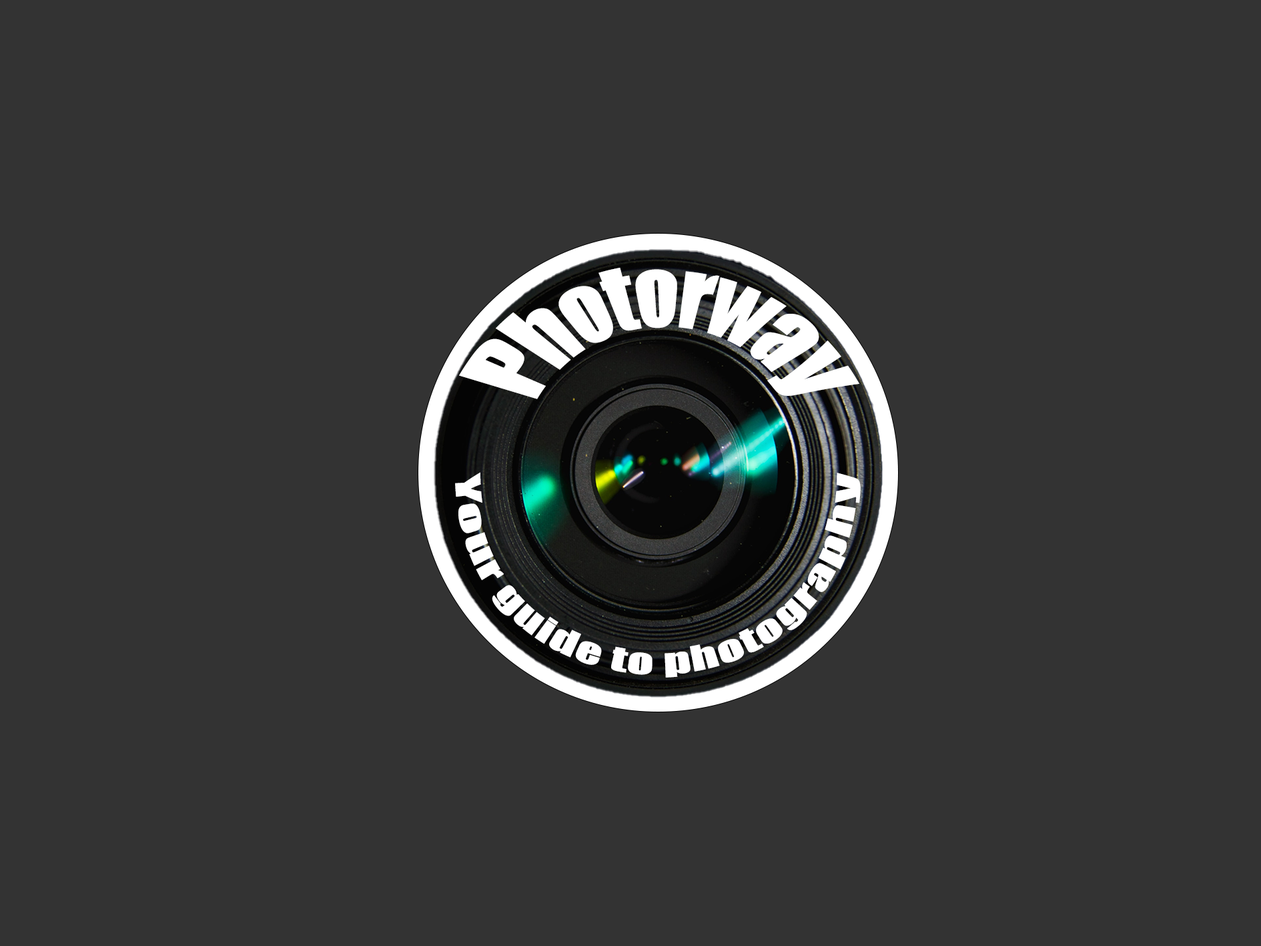
<style>
.page{position:relative;width:1261px;height:946px;background:#333333}
.page>*{position:absolute;margin:0}
.t1{font:55.8px "Impact";color:#ffffff}
.t2{font:32.1px "Impact";color:#ffffff}
</style>
<div class="page">
<p class="t1" style="left:459px;top:268px;width:400px;height:131px;text-align:center">Photorway</p>
<p class="t2" style="left:455px;top:472px;width:406px;height:205px;text-align:center">Your guide to photography</p>
</div>
